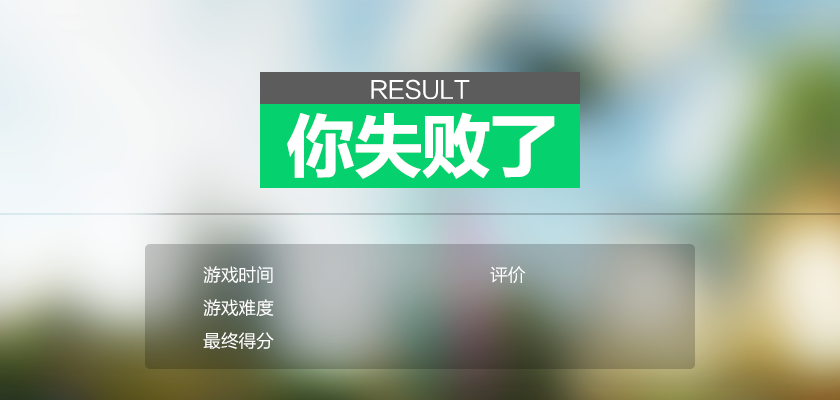
<style>
.page{position:relative;width:840px;height:400px}
.page>*{position:absolute;margin:0}
.t1{font:24px "FZLTHK--GBK1-0";letter-spacing:-0.02em;color:#ffffff}
.t2{font:72px "FZLTCHK--GBK1-0";letter-spacing:-0.06em;color:#ffffff}
.t3{font:18px "FZLTHK--GBK1-0";letter-spacing:-0.02em;color:#ffffff}
</style>
<div class="page">
<p class="t1" style="left:371px;top:79px;width:99px;height:21px">RESULT</p>
<p class="t2" style="left:287px;top:112px;width:268px;height:67px">你失败了</p>
<p class="t3" style="left:203px;top:266px;width:70px;height:17px">游戏时间</p>
<p class="t3" style="left:490px;top:266px;width:36px;height:17px">评价</p>
<p class="t3" style="left:203px;top:299px;width:71px;height:17px">游戏难度</p>
<p class="t3" style="left:203px;top:332px;width:71px;height:18px">最终得分</p>
</div>
